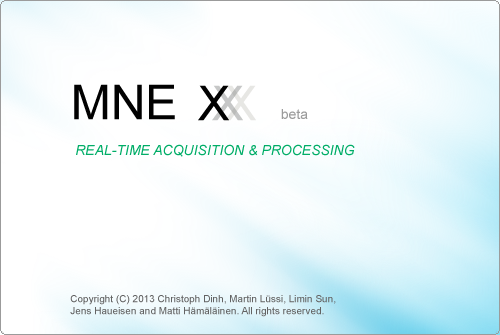
<style>
.page{position:relative;width:500px;height:335px;background:#ffffff}
.page>*{position:absolute;margin:0}
.t1{font:48px "ArialMT";color:#010101;text-transform:uppercase}
.t2{font:14px "ArialMT";color:#9b9b9b}
.t3{font:14px "Arial-ItalicMT";color:#00ad67;text-transform:uppercase}
.t4{font:10px "ArialMT";color:#636363}
</style>
<div class="page">
<p class="t1" style="left:74px;top:84px;width:101px;height:36px">MNE</p>
<p class="t1" style="left:198px;top:85px;width:31px;height:36px">X</p>
<p class="t2" style="left:281px;top:109px;width:27px;height:10px">beta</p>
<p class="t3" style="left:76px;top:144px;width:279px;height:13px">Real-Time Acquisition &amp; Processing</p>
<p class="t4" style="left:70px;top:295px;width:266px;height:22px">Copyright (C) 2013 Christoph Dinh, Martin Lüssi, Limin Sun,<br>Jens Haueisen and Matti Hämäläinen. All rights reserved.</p>
</div>
